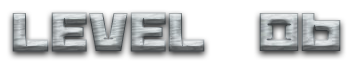
<style>
.page{position:relative;width:364px;height:64px;background:#ffffff}
.page>*{position:absolute;margin:0}
.t1{font:60px "BananaBrick"}
</style>
<div class="page">
<p class="t1" style="left:12px;top:12px;width:329px;height:40px">Level  06</p>
</div>
